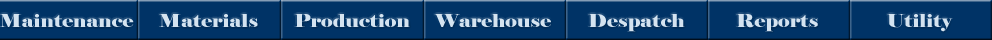
<style>
.page{position:relative;width:992px;height:40px;background:#003366}
.page>*{position:absolute;margin:0}
.t1{font:18px "Elephant-Regular";color:#d4e3f0;scale:1.14 1}
</style>
<div class="page">
<p class="t1" style="left:0px;top:14px;width:134px;height:13px">Maintenance</p>
<p class="t1" style="left:159px;top:14px;width:99px;height:14px">Materials</p>
<p class="t1" style="left:294px;top:14px;width:116px;height:13px">Production</p>
<p class="t1" style="left:434px;top:14px;width:117px;height:14px">Warehouse</p>
<p class="t1" style="left:588px;top:14px;width:97px;height:18px">Despatch</p>
<p class="t1" style="left:736px;top:14px;width:82px;height:18px">Reports</p>
<p class="t1" style="left:887px;top:14px;width:66px;height:18px">Utility</p>
</div>
